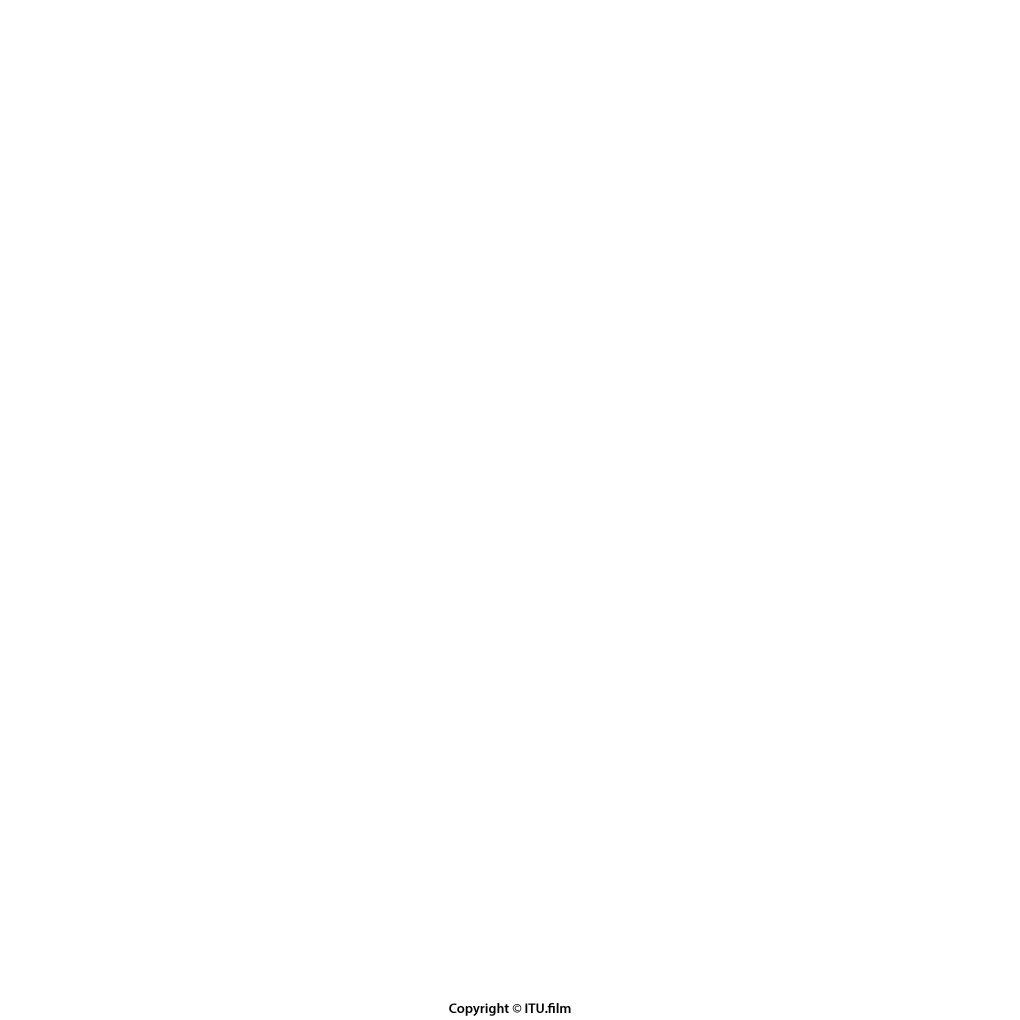
<style>
.page{position:relative;width:1020px;height:1020px;background:#ffffff}
.page>*{position:absolute;margin:0}
.t1{font:14px "MyriadPro-Semibold";color:#000000}
</style>
<div class="page">
<p class="t1" style="left:449px;top:1003px;width:122px;height:13px">Copyright © ITU.film</p>
</div>
